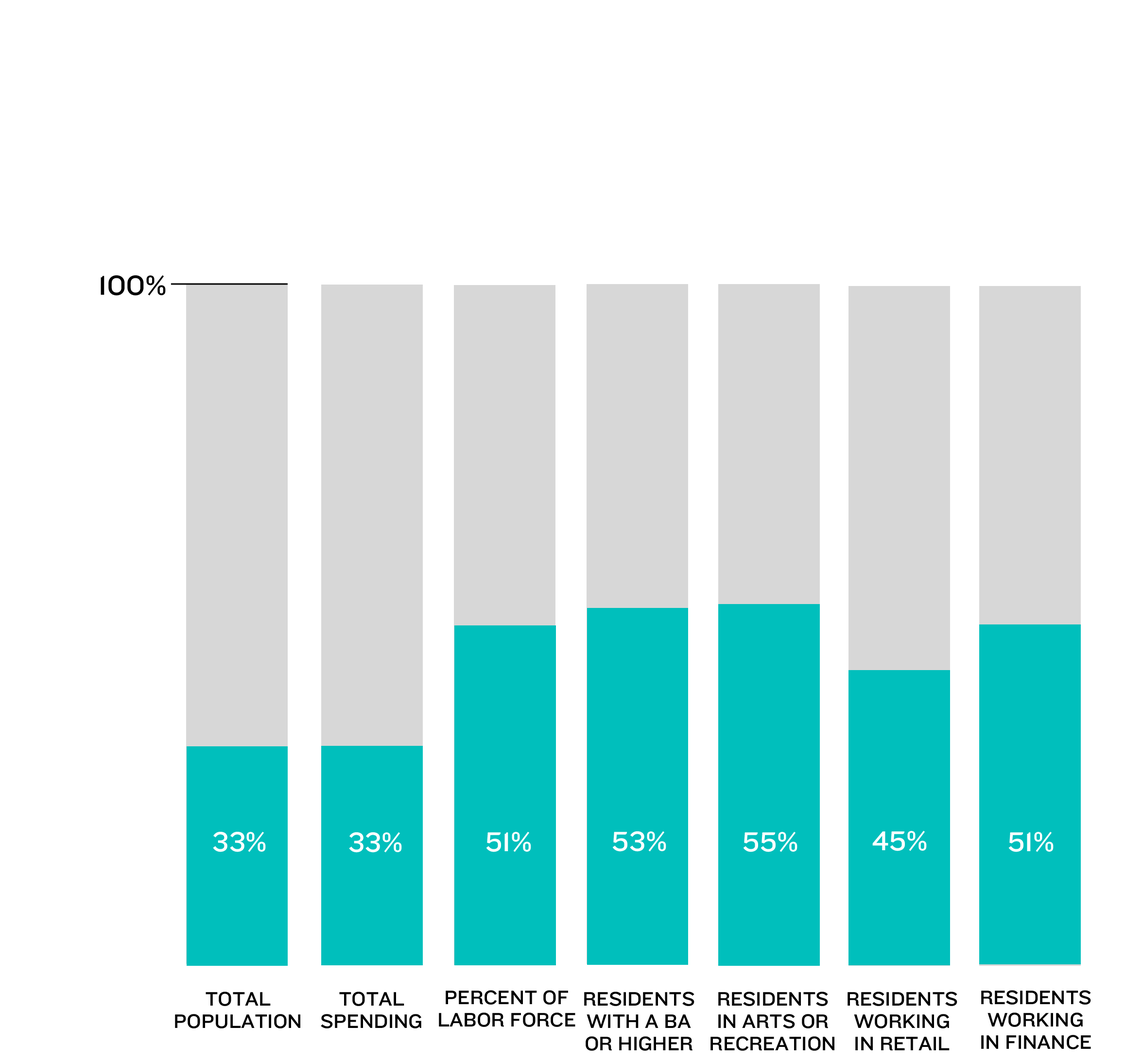
<style>
.page{position:relative;width:1125px;height:1060px;background:#ffffff}
.page>*{position:absolute;margin:0}
.t1{font:28.3px "Knockout-HTF32-JuniorCruiserwt";color:#000000;text-transform:uppercase}
.t2{font:28.3px "Knockout-HTF32-JuniorCruiserwt";color:#ffffff;text-transform:uppercase}
.t3{font:20.2px/22.3px "Knockout-HTF32-JuniorCruiserwt";color:#000000;text-transform:uppercase}
</style>
<div class="page">
<p class="t1" style="left:101px;top:275px;width:65px;height:21px">100%</p>
<p class="t2" style="left:213px;top:832px;width:53px;height:20px">33%</p>
<p class="t2" style="left:349px;top:833px;width:53px;height:20px">33%</p>
<p class="t2" style="left:486px;top:832px;width:45px;height:20px">51%</p>
<p class="t2" style="left:612px;top:832px;width:54px;height:20px">53%</p>
<p class="t2" style="left:743px;top:832px;width:54px;height:20px">55%</p>
<p class="t2" style="left:872px;top:831px;width:54px;height:21px">45%</p>
<p class="t2" style="left:1008px;top:832px;width:45px;height:20px">51%</p>
<p class="t3" style="left:175px;top:992px;width:125px;height:37px;text-align:center">Total  <br>population</p>
<p class="t3" style="left:321px;top:992px;width:100px;height:37px;text-align:center">total<br>spending</p>
<p class="t3" style="left:439px;top:990px;width:136px;height:37px;text-align:center">percent of<br>labor force</p>
<p class="t3" style="left:584px;top:992px;width:110px;height:59px;text-align:center">Residents with a ba <br>or higher</p>
<p class="t3" style="left:710px;top:992px;width:124px;height:59px;text-align:center">Residents <br>in arts or<br>recreation</p>
<p class="t3" style="left:847px;top:992px;width:110px;height:59px;text-align:center">Residents<br>working <br>in retail</p>
<p class="t3" style="left:981px;top:990px;width:110px;height:60px;text-align:center">Residents <br>working <br>in finance</p>
</div>
